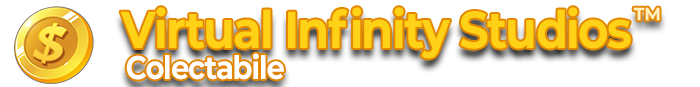
<style>
.page{position:relative;width:700px;height:87px;background:#ffffff}
.page>*{position:absolute;margin:0}
.t1{font:51.8px "Montserrat-Bold";letter-spacing:-0.04em;color:#ffd117;scale:0.9 1}
.t2{font:30.4px "Montserrat-Bold";letter-spacing:-0.04em;color:#fff1b9;scale:0.89 1}
.t3{font:32.4px "Montserrat-Bold";letter-spacing:-0.04em;color:#ffffff;scale:0.9 1}
</style>
<div class="page">
<p class="t1" style="left:120px;top:7px;width:511px;height:52px">Virtual Infinity Studios</p>
<p class="t2" style="left:633px;top:7px;width:27px;height:14px">™</p>
<p class="t3" style="left:126px;top:53px;width:158px;height:27px">Colectabile</p>
</div>
